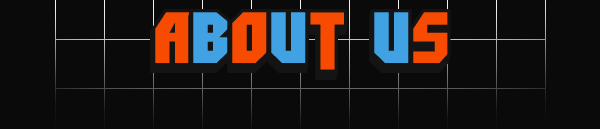
<style>
.page{position:relative;width:600px;height:129px;background:#0a0a0a}
.page>*{position:absolute;margin:0}
.t1{font:72px "DimitriSwank";color:#141414}
</style>
<div class="page">
<p class="t1" style="left:150px;top:9px;width:301px;height:71px">ABOUT US</p>
</div>
